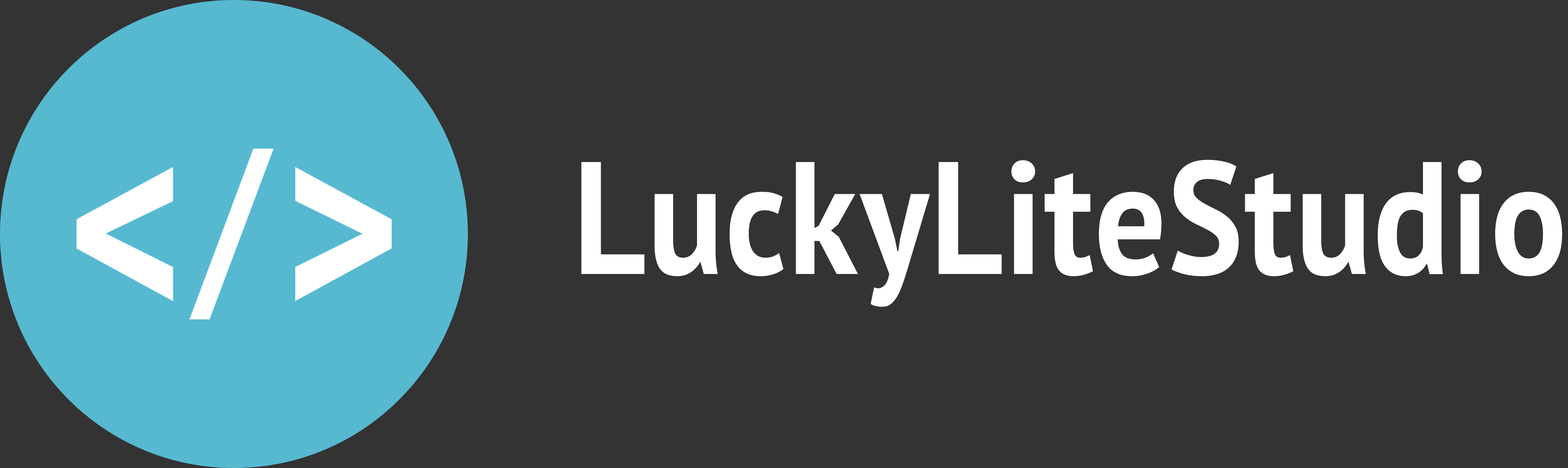
<style>
.page{position:relative;width:1568px;height:468px;background:#333333}
.page>*{position:absolute;margin:0}
.t1{font:159.7px "PTSans-Bold";letter-spacing:0.01em;color:#ffffff;scale:0.89 1}
</style>
<div class="page">
<p class="t1" style="left:581px;top:160px;width:981px;height:147px">LuckyLiteStudio</p>
</div>
